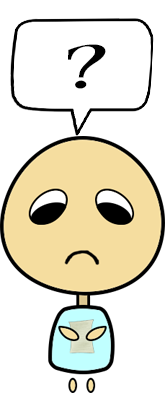
<style>
.page{position:relative;width:165px;height:393px;background:#ffffff}
.page>*{position:absolute;margin:0}
.t1{font:12.7px "FootlightMTLight";color:#000000;scale:1.43 1}
</style>
<div class="page">
<p class="t1" style="left:68px;top:44px;width:38px;height:45px;rotate:-1deg">?</p>
</div>
